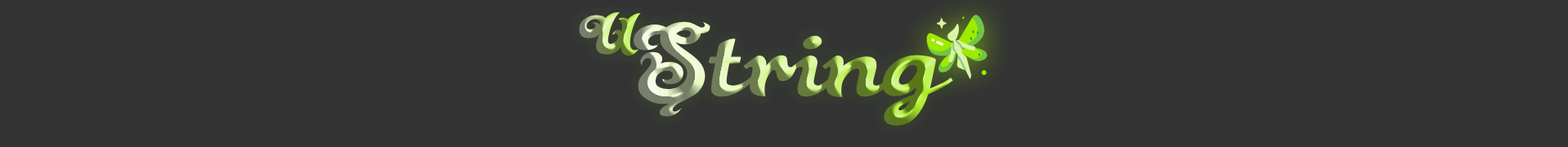
<style>
.page{position:relative;width:1568px;height:147px;background:#333333}
.page>*{position:absolute;margin:0}
.t1{font:62.2px "BlackRose";scale:1.2 1}
.t2{font:108.8px "BlackRose";scale:1.2 1}
</style>
<div class="page">
<p class="t1" style="left:579px;top:12px;width:62px;height:44px;rotate:2deg">U</p>
<p class="t2" style="left:634px;top:21px;width:319px;height:105px">String</p>
</div>
